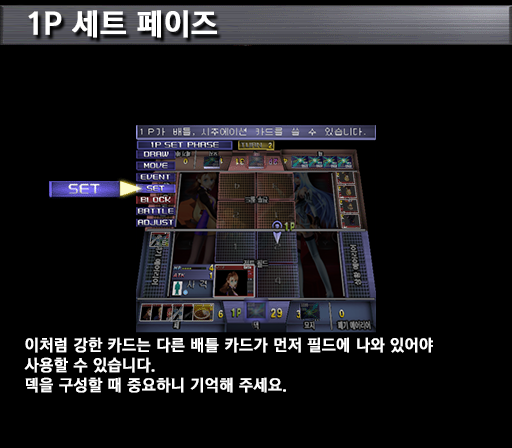
<style>
.page{position:relative;width:512px;height:448px;background:#000000}
.page>*{position:absolute;margin:0}
.t1{font:30px "KoreanGD15-R";color:#ffffff;font-weight:bold}
.t2{font:16px/20px "KoreanGD15-R";color:#ffffff;font-weight:bold}
</style>
<div class="page">
<p class="t1" style="left:28px;top:10px;width:189px;height:28px">1P 세트 페이즈</p>
<p class="t2" style="left:24px;top:337px;width:409px;height:56px">이처럼 강한 카드는 다른 배틀 카드가 먼저 필드에 나와 있어야<br>사용할 수 있습니다.<br>덱을 구성할 때 중요하니 기억해 주세요.</p>
</div>
